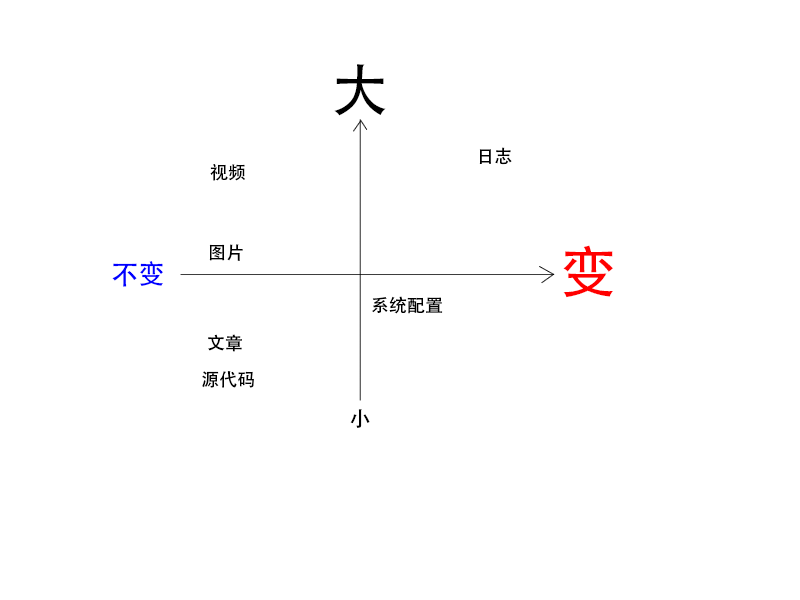
<style>
.page{position:relative;width:800px;height:600px;background:#ffffff}
.page>*{position:absolute;margin:0}
.t1{font:58.1px "AdobeHeitiStd-Regular";color:#000000}
.t2{font:18px "AdobeHeitiStd-Regular";color:#000000}
.t3{font:57px "AdobeHeitiStd-Regular";color:#ff0000}
.t4{font:27px "AdobeHeitiStd-Regular";color:#0000ff}
.t5{font:21.1px "AdobeHeitiStd-Regular";color:#000000}
</style>
<div class="page">
<p class="t1" style="left:334px;top:64px;width:52px;height:52px">大</p>
<p class="t2" style="left:479px;top:147px;width:33px;height:18px">日志</p>
<p class="t2" style="left:210px;top:164px;width:35px;height:17px">视频</p>
<p class="t2" style="left:209px;top:244px;width:34px;height:17px">图片</p>
<p class="t3" style="left:563px;top:245px;width:50px;height:53px">变</p>
<p class="t4" style="left:112px;top:261px;width:51px;height:26px">不变</p>
<p class="t2" style="left:372px;top:296px;width:71px;height:18px">系统配置</p>
<p class="t2" style="left:208px;top:334px;width:34px;height:18px">文章</p>
<p class="t2" style="left:202px;top:371px;width:52px;height:17px">源代码</p>
<p class="t5" style="left:350px;top:409px;width:20px;height:19px">小</p>
</div>
